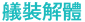
<style>
.page{position:relative;width:85px;height:22px;background:#ffffff}
.page>*{position:absolute;margin:0}
.t1{font:20px "GothicMB101Pr6N-Medium";color:#1cbbbe}
</style>
<div class="page">
<p class="t1" style="left:2px;top:2px;width:80px;height:19px">艤裝解體</p>
</div>
